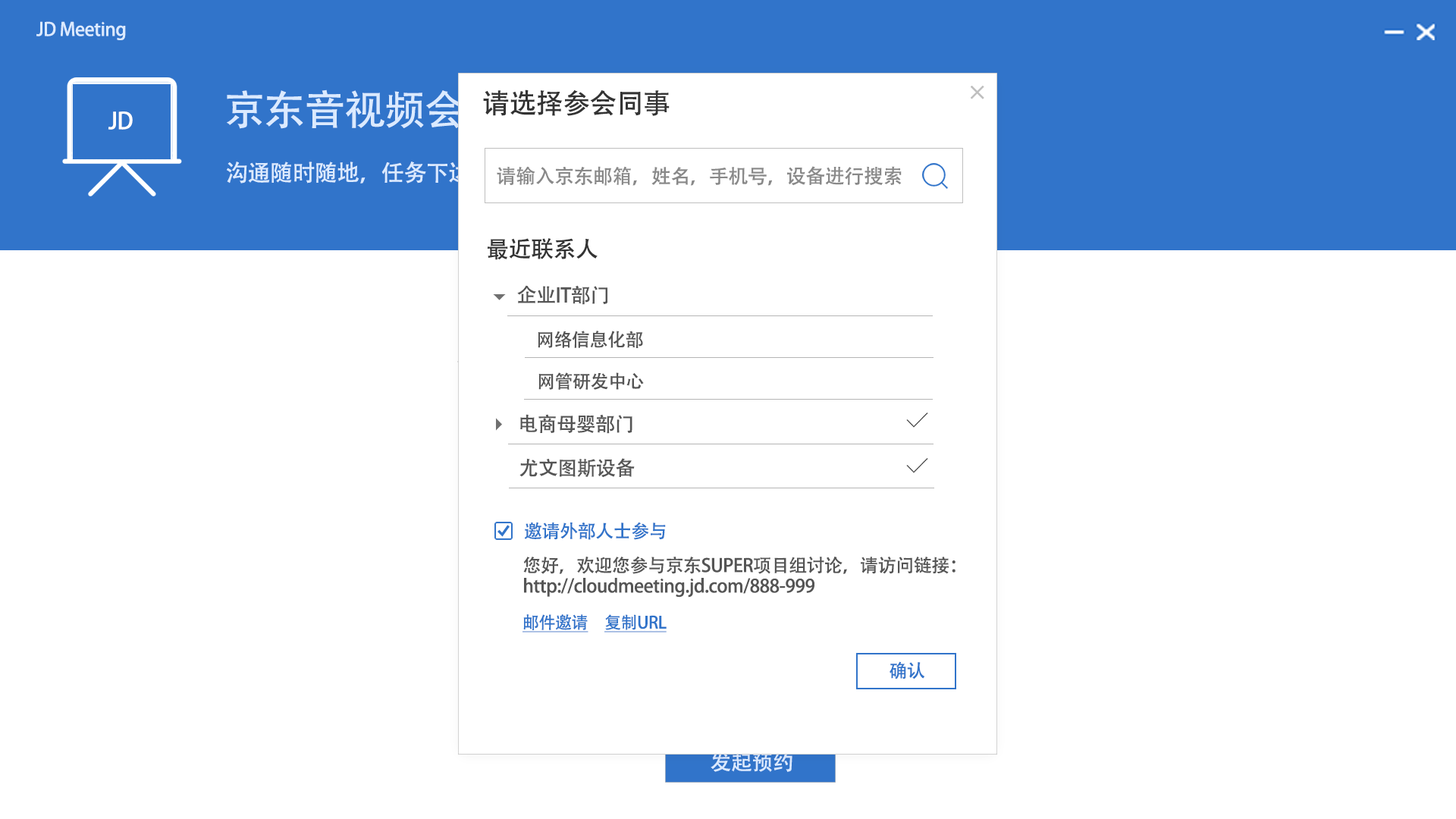
<style>
.page{position:relative;width:1456px;height:819px;background:#ffffff}
.page>*{position:absolute;margin:0}
.t1{font:18.2px "AdobeHeitiStd-Regular";letter-spacing:-0.02em;color:#dbeaff}
.t2{font:40.9px "AdobeHeitiStd-Regular";letter-spacing:-0.02em;color:#dbeaff}
.t3{font:27.3px "AdobeHeitiStd-Regular";letter-spacing:-0.02em;color:#333333}
.t4{font:22.7px "AdobeHeitiStd-Regular";letter-spacing:-0.02em;color:#fefefe}
.t5{font:22.7px "AdobeHeitiStd-Regular";letter-spacing:-0.02em;color:#dbeaff}
.t6{font:19.7px "AdobeHeitiStd-Regular";letter-spacing:-0.02em;color:#898989}
.t7{font:22.7px "AdobeHeitiStd-Regular";letter-spacing:-0.02em;color:#333333}
.t8{font:19.7px "AdobeHeitiStd-Regular";letter-spacing:-0.02em;color:#555555}
.t9{font:18.2px "AdobeHeitiStd-Regular";letter-spacing:-0.02em;color:#555555}
.t10{font:18.2px "AdobeHeitiStd-Regular";letter-spacing:-0.02em;color:#3174ca}
.t11{font:18.2px/6.8px "AdobeHeitiStd-Regular";letter-spacing:-0.02em;color:#555555}
.t12{font:16.7px "AdobeHeitiStd-Regular";letter-spacing:-0.02em;color:#3174ca;text-decoration:underline}
.t13{font:21.2px "AdobeHeitiStd-Regular";letter-spacing:-0.02em;color:#dbeaff}
</style>
<div class="page">
<p class="t1" style="left:36px;top:21px;width:90px;height:19px">JD Meeting</p>
<p class="t2" style="left:227px;top:89px;width:277px;height:40px">京东音视频会议</p>
<p class="t3" style="left:483px;top:89px;width:187px;height:27px">请选择参会同事</p>
<p class="t4" style="left:108px;top:111px;width:25px;height:19px">JD</p>
<p class="t5" style="left:227px;top:162px;width:333px;height:22px">沟通随时随地，任务下达必有反馈</p>
<p class="t6" style="left:497px;top:166px;width:405px;height:20px">请输入京东邮箱，姓名，手机号，设备进行搜索</p>
<p class="t7" style="left:488px;top:238px;width:110px;height:22px">最近联系人</p>
<p class="t8" style="left:517px;top:285px;width:90px;height:20px">企业IT部门</p>
<p class="t9" style="left:538px;top:331px;width:105px;height:17px">网络信息化部</p>
<p class="t9" style="left:538px;top:372px;width:106px;height:18px">网管研发中心</p>
<p class="t8" style="left:520px;top:414px;width:112px;height:20px">电商母婴部门</p>
<p class="t8" style="left:519px;top:458px;width:116px;height:20px">尤文图斯设备</p>
<p class="t10" style="left:524px;top:522px;width:142px;height:18px">邀请外部人士参与</p>
<p class="t11" style="left:523px;top:556px;width:432px;height:42px">您好，欢迎您参与京东SUPER项目组讨论，请访问链接：<br><br><br>http://cloudmeeting.jd.com/888-999</p>
<p class="t12" style="left:522px;top:614px;width:66px;height:18px">邮件邀请</p>
<p class="t12" style="left:604px;top:614px;width:63px;height:18px">复制URL</p>
<p class="t10" style="left:890px;top:661px;width:35px;height:18px">确认</p>
<p class="t13" style="left:711px;top:751px;width:81px;height:21px">发起预约</p>
</div>
